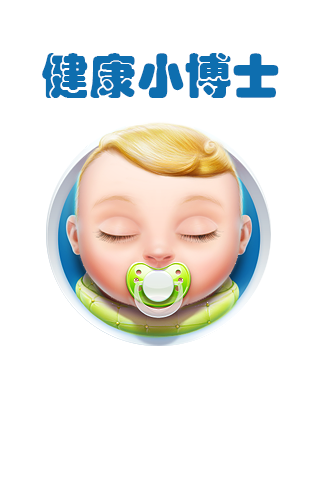
<style>
.page{position:relative;width:320px;height:480px;background:#ffffff}
.page>*{position:absolute;margin:0}
.t1{font:48px "STHupo";color:#0e6eaf}
</style>
<div class="page">
<p class="t1" style="left:42px;top:53px;width:237px;height:45px">健康小博士</p>
</div>
